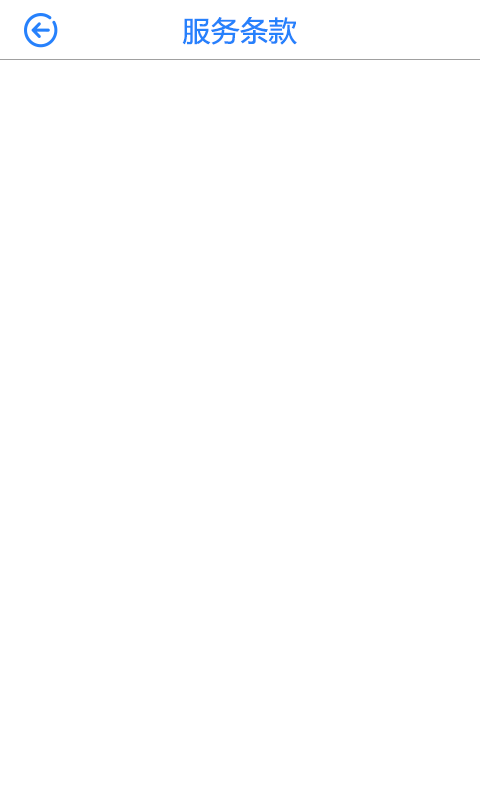
<style>
.page{position:relative;width:480px;height:800px;background:#ffffff}
.page>*{position:absolute;margin:0}
.t1{font:28px "MicrosoftYaHei";color:#2681fc;font-weight:bold}
</style>
<div class="page">
<p class="t1" style="left:182px;top:17px;width:115px;height:28px">服务条款</p>
</div>
